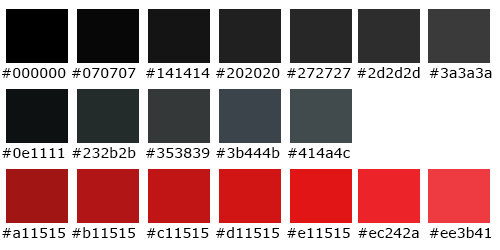
<style>
.page{position:relative;width:500px;height:250px;background:#ffffff}
.page>*{position:absolute;margin:0}
.t1{font:14px "Verdana";letter-spacing:0.005em;color:#000000}
</style>
<div class="page">
<p class="t1" style="left:2px;top:68px;width:64px;height:10px">#000000</p>
<p class="t1" style="left:72px;top:68px;width:64px;height:10px">#070707</p>
<p class="t1" style="left:146px;top:68px;width:64px;height:10px">#141414</p>
<p class="t1" style="left:216px;top:68px;width:64px;height:10px">#202020</p>
<p class="t1" style="left:287px;top:68px;width:64px;height:10px">#272727</p>
<p class="t1" style="left:357px;top:67px;width:63px;height:11px">#2d2d2d</p>
<p class="t1" style="left:429px;top:68px;width:63px;height:10px">#3a3a3a</p>
<p class="t1" style="left:2px;top:148px;width:63px;height:10px">#0e1111</p>
<p class="t1" style="left:72px;top:147px;width:64px;height:11px">#232b2b</p>
<p class="t1" style="left:146px;top:148px;width:64px;height:10px">#353839</p>
<p class="t1" style="left:216px;top:147px;width:64px;height:11px">#3b444b</p>
<p class="t1" style="left:288px;top:148px;width:62px;height:10px">#414a4c</p>
<p class="t1" style="left:2px;top:228px;width:63px;height:10px">#a11515</p>
<p class="t1" style="left:72px;top:227px;width:63px;height:11px">#b11515</p>
<p class="t1" style="left:146px;top:228px;width:63px;height:10px">#c11515</p>
<p class="t1" style="left:216px;top:227px;width:63px;height:11px">#d11515</p>
<p class="t1" style="left:287px;top:228px;width:63px;height:10px">#e11515</p>
<p class="t1" style="left:358px;top:228px;width:61px;height:10px">#ec242a</p>
<p class="t1" style="left:429px;top:227px;width:62px;height:11px">#ee3b41</p>
</div>
